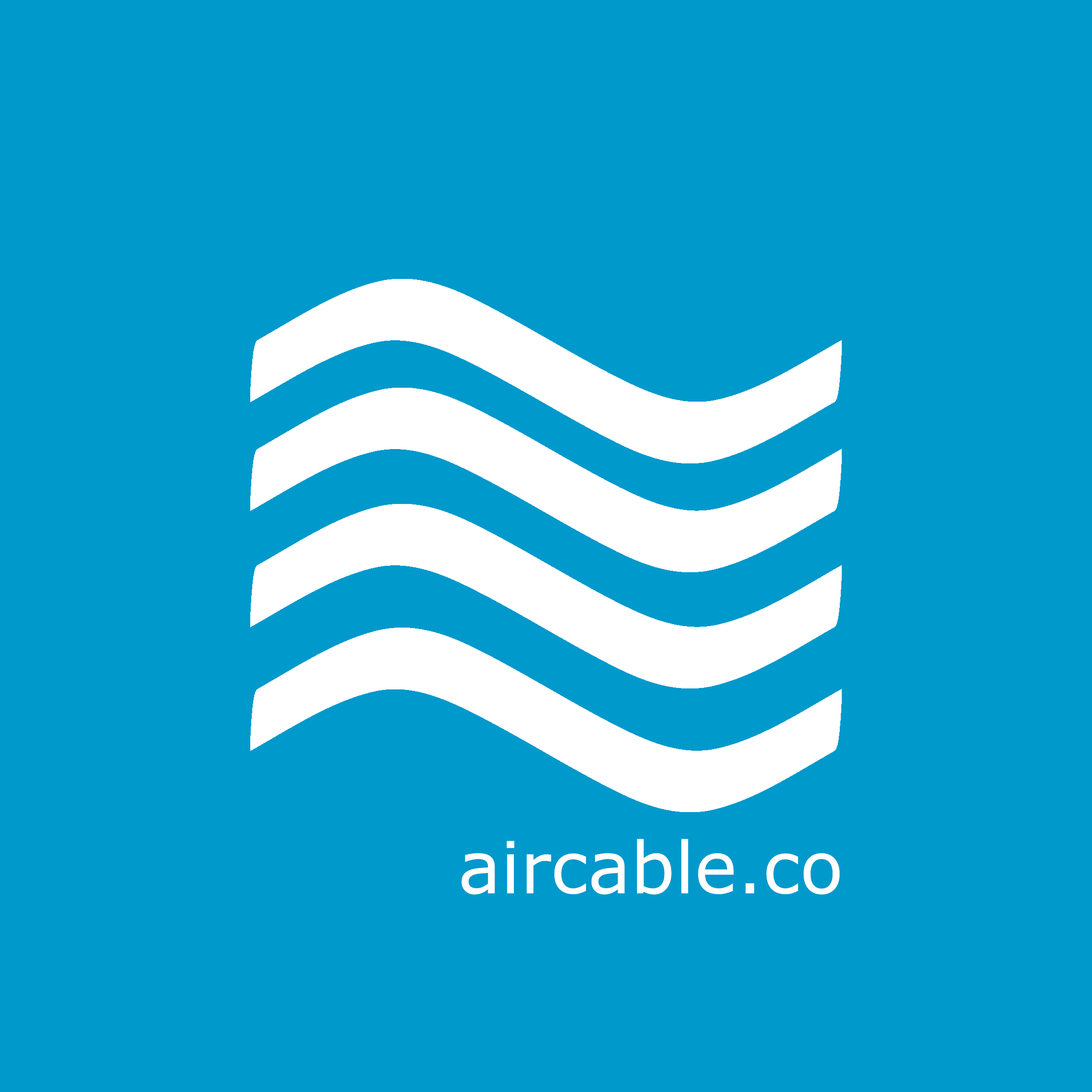
<style>
.page{position:relative;width:1092px;height:1092px;background:#0099cc}
.page>*{position:absolute;margin:0}
.t1{font:71.2px "Verdana";color:#ffffff}
</style>
<div class="page">
<p class="t1" style="left:461px;top:839px;width:379px;height:56px">aircable.co</p>
</div>
